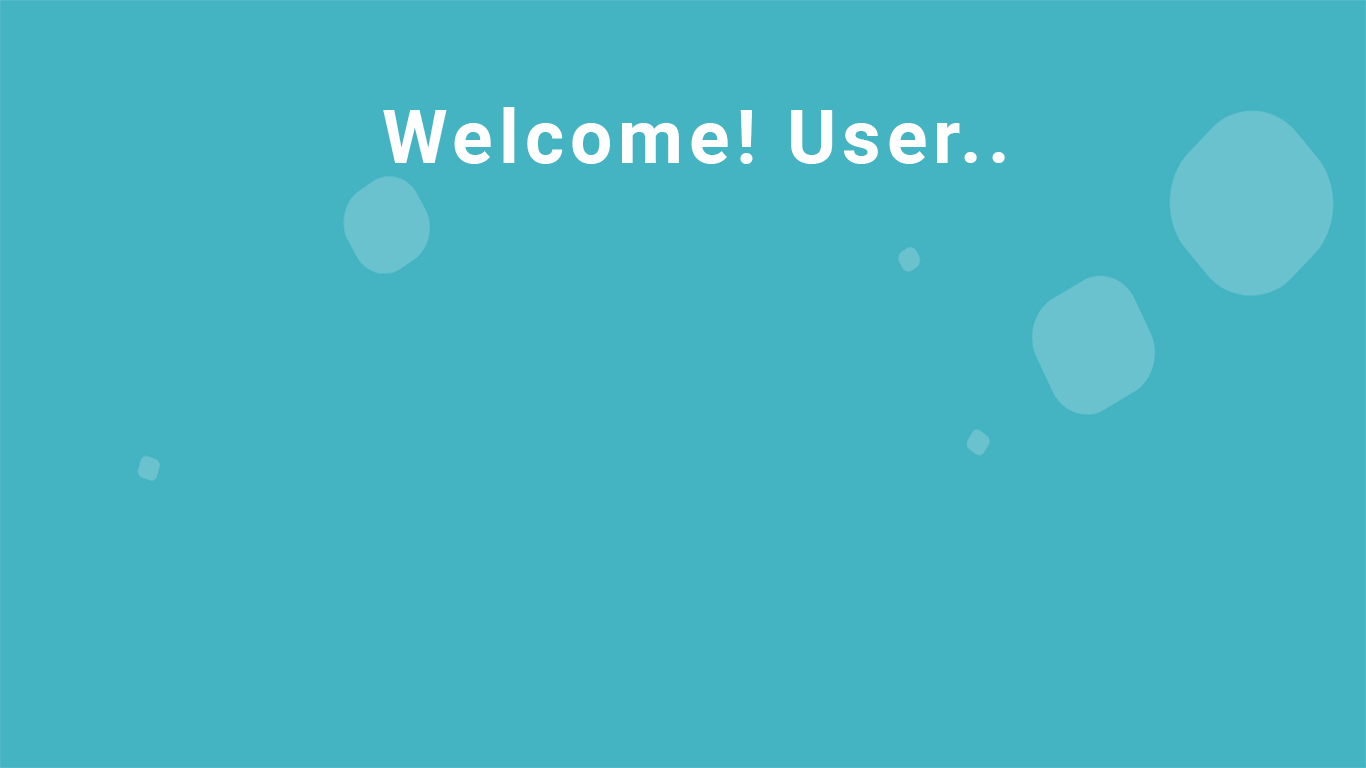
<style>
.page{position:relative;width:1366px;height:768px;background:#44b3c2}
.page>*{position:absolute;margin:0}
.t1{font:75px "Roboto-Bold";letter-spacing:0.08em;color:#ffffff}
</style>
<div class="page">
<p class="t1" style="left:383px;top:107px;width:622px;height:57px">Welcome! User..</p>
</div>
